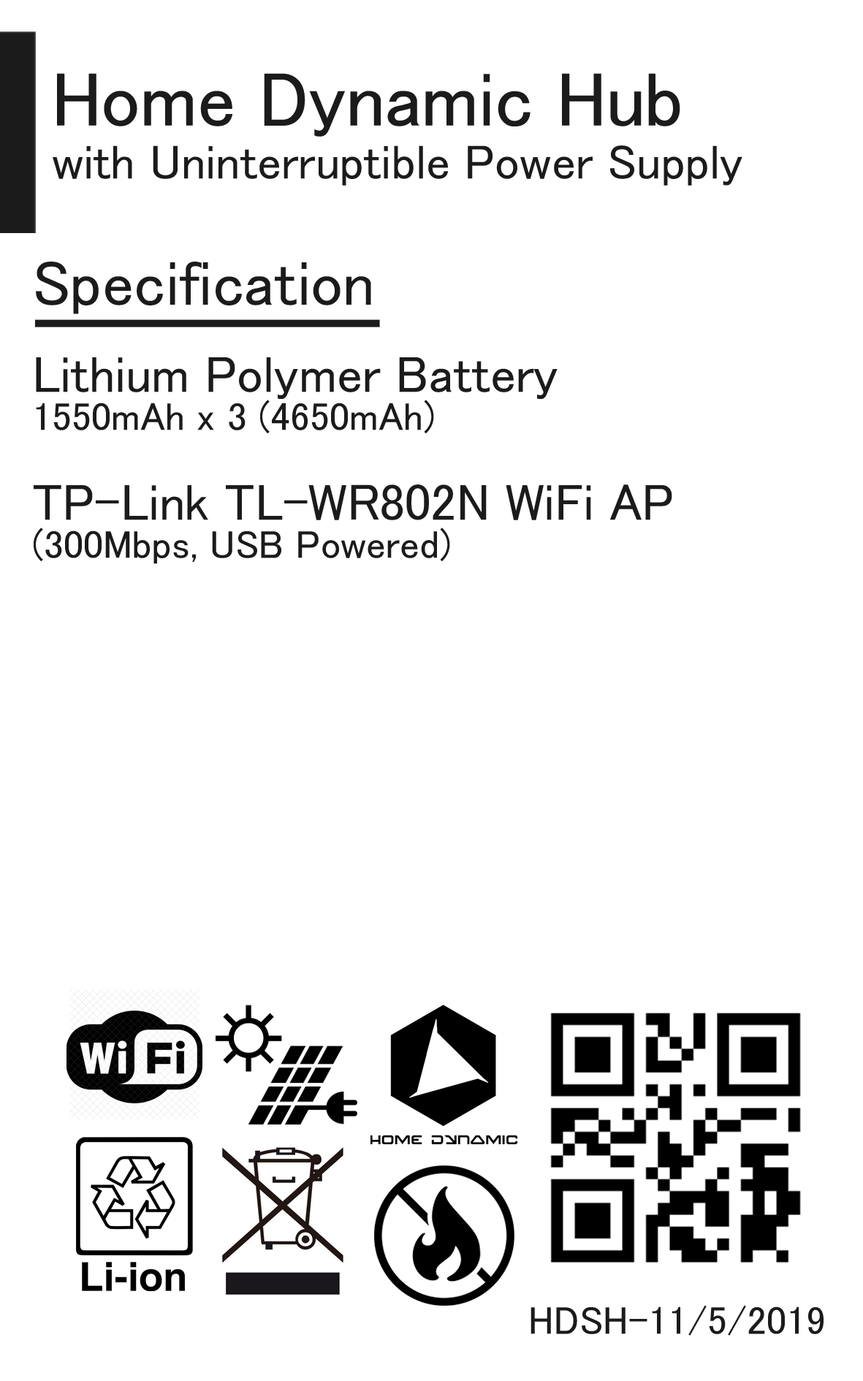
<style>
.page{position:relative;width:863px;height:1381px;background:#ffffff}
.page>*{position:absolute;margin:0}
.t1{font:48.7px/77.3px "MS-PGothic";color:#1b1b1b}
.t2{font:77.3px/77.3px "MS-PGothic";color:#1b1b1b}
.t3{font:51.7px/48.7px "MS-PGothic";color:#1b1b1b}
.t4{font:63.8px/48.7px "MS-PGothic";color:#1b1b1b}
.t5{font:39.5px/48.7px "MS-PGothic";color:#1b1b1b}
.t6{font:39.5px/6.2px "MS-PGothic";color:#1b1b1b}
.t7{font:39.5px "MS-PGothic";color:#1b1b1b}
</style>
<div class="page">
<p class="t1" style="left:53px;top:73px;width:690px;height:113px"><span class="t2">Home Dynamic Hub <br></span>with Uninterruptible Power Supply</p>
<p class="t3" style="left:34px;top:262px;width:638px;height:302px"><span class="t4">Specification<br><br></span>Lithium Polymer Battery <br><span class="t5">1550mAh x 3 (4</span><span class="t6">650mAh)<br><br></span>TP-Link TL-WR802N WiFi AP<br><span class="t5">(300Mbps, USB Powered)</span></p>
<p class="t7" style="left:531px;top:1305px;width:293px;height:31px">HDSH-11/5/2019</p>
</div>
